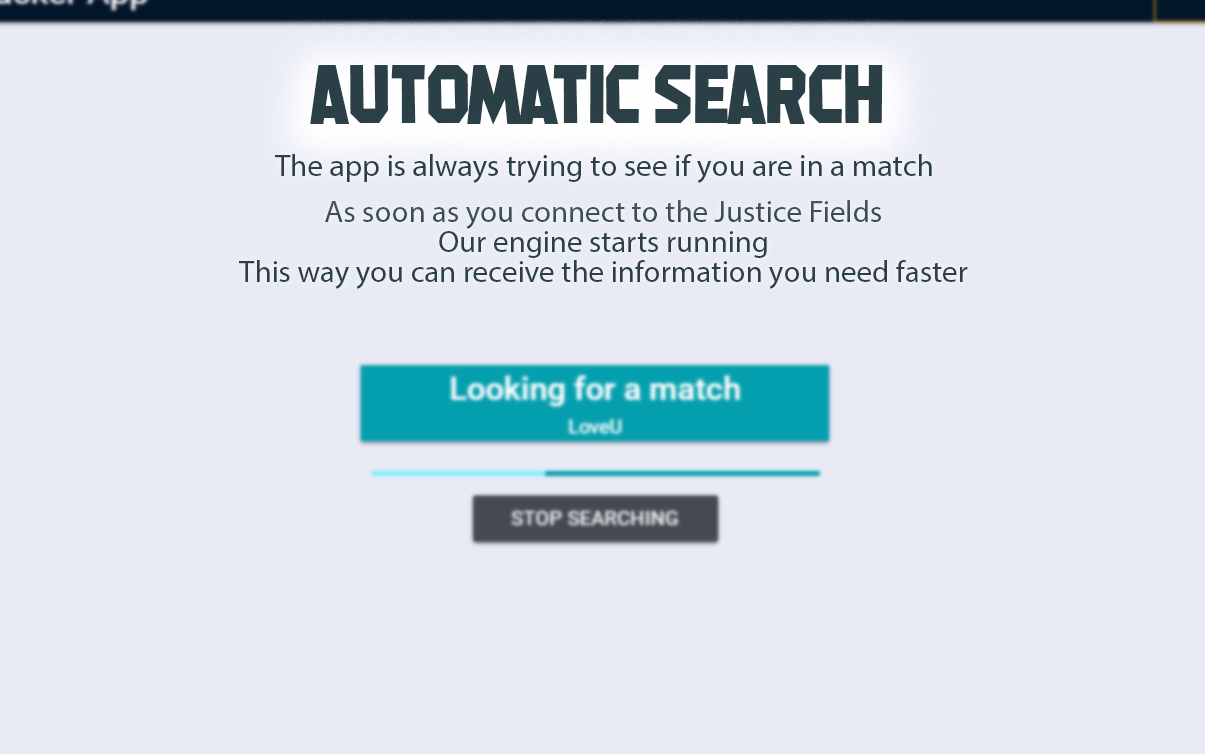
<style>
.page{position:relative;width:1205px;height:754px;background:#e8eaf6}
.page>*{position:absolute;margin:0}
.t1{font:82.1px "MachineGunk";color:#2b3f47}
.t2{font:31.1px "MyriadPro-Regular";color:#2b3f47}
.t3{font:30.9px/30px "MyriadPro-Regular";color:#2b3f47}
</style>
<div class="page">
<p class="t1" style="left:310px;top:65px;width:573px;height:60px">Automatic Search</p>
<p class="t2" style="left:275px;top:154px;width:657px;height:29px">The app is always trying to see if you are in a match</p>
<p class="t3" style="left:239px;top:200px;width:729px;height:89px;text-align:center">As soon as you connect to the Justice Fields<br>Our engine starts running<br>This way you can receive the information you need faster</p>
</div>
